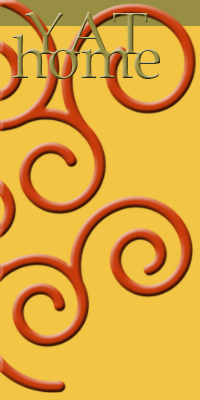
<style>
.page{position:relative;width:200px;height:400px;background:#f2c545}
.page>*{position:absolute;margin:0}
.t1{font:60px/24px "BookAntiqua"}
</style>
<div class="page">
<p class="t1" style="left:12px;top:12px;width:148px;height:67px;text-align:center">YAT<br>home</p>
</div>
